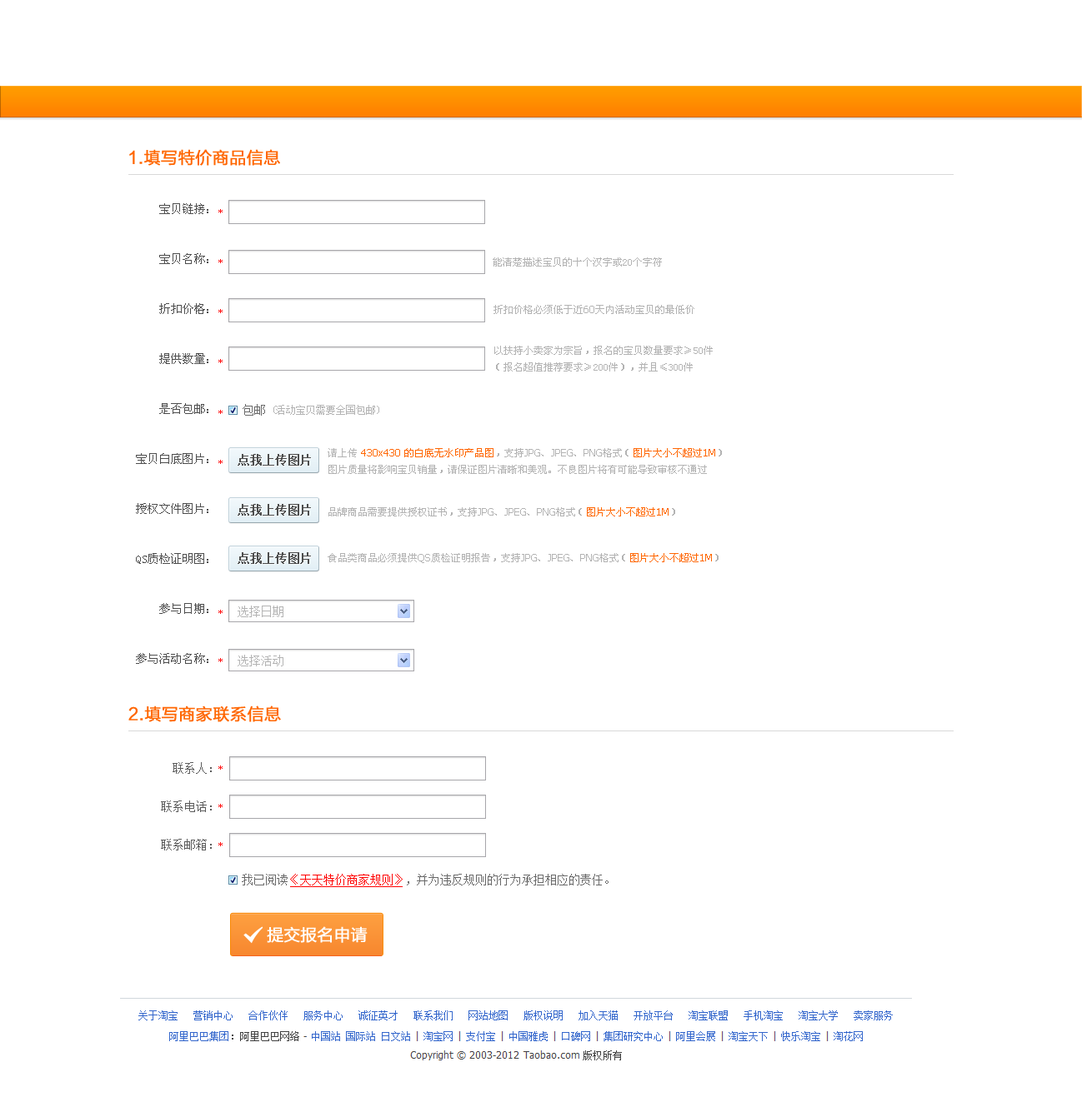
<style>
.page{position:relative;width:1082px;height:1102px;background:#ffffff}
.page>*{position:absolute;margin:0}
.t1{font:16.7px "FZLTHK--GBK1-0";color:#ff6600;font-weight:bold}
.t2{font:11.7px/50px "SimSun";color:#4d4d4d}
.t3{font:10px "Tahoma";color:#ff0000}
.t4{font:10px "SimSun";color:#b3b3b3}
.t5{font:10px "Tahoma";color:#b3b3b3}
.t6{font:10px/16.7px "SimSun";color:#b3b3b3}
.t7{font:11.7px "SimSun";color:#696969}
.t8{font:10px/16.7px "Tahoma";color:#ff6600}
.t9{font:10px/16.7px "SimSun";color:#ff6600}
.t10{font:10px/16.7px "Tahoma";color:#b3b3b3}
.t11{font:10px "SimSun";color:#ff6600}
.t12{font:10px "Tahoma";color:#ff6600}
.t13{font:11.7px "SimSun";color:#b3b3b3}
.t14{font:11.7px "SimSun";color:#5b5b5b}
.t15{font:11.7px "SimSun";color:#ff0000}
.t16{font:16.7px "FZLTHK--GBK1-0";letter-spacing:-0.025em;color:#ffffff;font-weight:bold}
</style>
<div class="page">
<p class="t1" style="left:129px;top:149px;width:151px;height:17px">1.填写特价商品信息</p>
<p class="t2" style="left:136px;top:203px;width:72px;height:461px;text-align:right">宝贝链接：<br>宝贝名称：<br>折扣价格：<br>提供数量：<br>是否包邮：<br>宝贝白底图片：<br>授权文件图片：<br>QS质检证明图：<br>参与日期：<br>参与活动名称：</p>
<p class="t3" style="left:218px;top:209px;width:4px;height:4px">*</p>
<p class="t4" style="left:492px;top:257px;width:170px;height:10px">能清楚描述宝贝的十个汉字或20个字符</p>
<p class="t3" style="left:218px;top:259px;width:4px;height:4px">*</p>
<p class="t4" style="left:493px;top:305px;width:201px;height:9px">折扣价格必须低于近<span class="t5">60</span>天内活动宝贝的最低价</p>
<p class="t3" style="left:218px;top:309px;width:4px;height:4px">*</p>
<p class="t6" style="left:494px;top:346px;width:218px;height:26px">以扶持小卖家为宗旨，报名的宝贝数量要求≥50件<br>（报名超值推荐要求≥200件），并且≤300件</p>
<p class="t3" style="left:218px;top:359px;width:4px;height:4px">*</p>
<p class="t3" style="left:218px;top:410px;width:4px;height:4px">*</p>
<p class="t7" style="left:242px;top:404px;width:23px;height:12px">包邮</p>
<p class="t4" style="left:273px;top:405px;width:106px;height:10px">(活动宝贝需要全国包邮)</p>
<p class="t6" style="left:327px;top:448px;width:395px;height:26px">请上传 <span class="t8">430x430 </span><span class="t9">的白底无水印产品图</span>，支持<span class="t10">JPG</span>、<span class="t10">JPEG</span>、<span class="t10">PNG</span>格式（<span class="t9">图片大小不超过</span><span class="t8">1M</span>）<br>图片质量将影响宝贝销量，请保证图片清晰和美观。不良图片将有可能导致审核不通过</p>
<p class="t3" style="left:218px;top:460px;width:4px;height:4px">*</p>
<p class="t4" style="left:328px;top:507px;width:347px;height:10px">品牌商品需要提供授权证书，支持<span class="t5">JPG</span>、<span class="t5">JPEG</span>、<span class="t5">PNG</span>格式（<span class="t11">图片大小不超过</span><span class="t12">1M</span>）</p>
<p class="t4" style="left:327px;top:553px;width:391px;height:10px">食品类商品必须提供<span class="t5">QS</span>质检证明报告，支持<span class="t5">JPG</span>、<span class="t5">JPEG</span>、<span class="t5">PNG</span>格式（<span class="t11">图片大小不超过</span><span class="t12">1M</span>）</p>
<p class="t13" style="left:237px;top:606px;width:46px;height:11px">选择日期</p>
<p class="t3" style="left:218px;top:610px;width:4px;height:4px">*</p>
<p class="t3" style="left:218px;top:658px;width:4px;height:4px">*</p>
<p class="t13" style="left:237px;top:655px;width:46px;height:12px">选择活动</p>
<p class="t1" style="left:128px;top:706px;width:153px;height:16px">2.填写商家联系信息</p>
<p class="t14" style="left:172px;top:762px;width:40px;height:12px">联系人：</p>
<p class="t3" style="left:218px;top:766px;width:4px;height:4px">*</p>
<p class="t14" style="left:161px;top:801px;width:51px;height:11px">联系电话：</p>
<p class="t3" style="left:218px;top:804px;width:4px;height:4px">*</p>
<p class="t14" style="left:161px;top:839px;width:51px;height:12px">联系邮箱：</p>
<p class="t3" style="left:218px;top:842px;width:4px;height:5px">*</p>
<p class="t7" style="left:242px;top:874px;width:366px;height:12px">我已阅读<span class="t15">《天天特价商家规则》</span>，并为违反规则的行为承担相应的责任。</p>
<p class="t16" style="left:267px;top:927px;width:100px;height:16px">提交报名申请</p>
</div>
